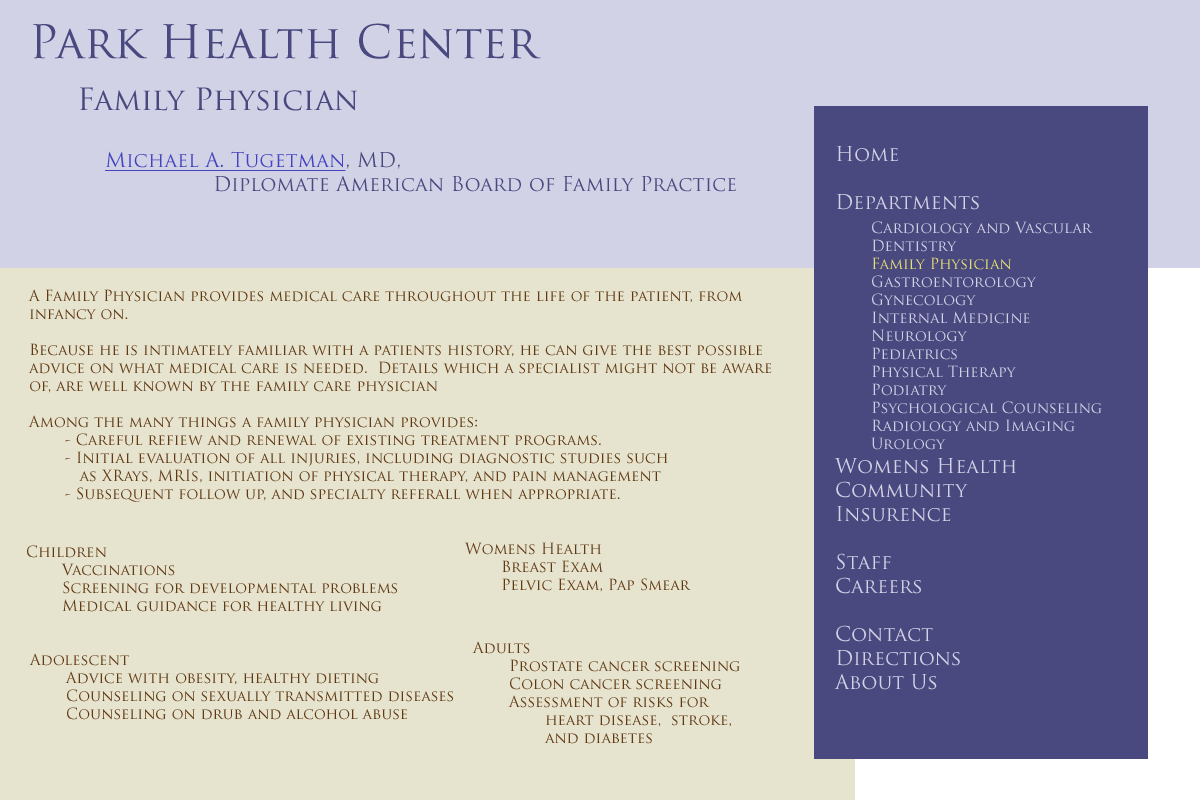
<style>
.page{position:relative;width:1200px;height:800px;background:#e6e3cf}
.page>*{position:absolute;margin:0}
.t1{font:45px "TrajanPro-Regular";color:#494980}
.t2{font:30px "TrajanPro-Regular";color:#494980}
.t3{font:15px "TrajanPro-Regular";color:#d2d2e6}
.t4{font:20px "TrajanPro-Regular";color:#d2d2e6}
.t5{font:15px "TrajanPro-Regular";color:#e6e073}
.t6{font:20px "TrajanPro-Regular";color:#494980}
.t7{font:20px "TrajanPro-Regular";color:#4444bf;text-decoration:underline}
.t8{font:15px "TrajanPro-Regular";color:#603913}
</style>
<div class="page">
<p class="t1" style="left:33px;top:23px;width:508px;height:36px">Park Health Center</p>
<p class="t2" style="left:79px;top:87px;width:278px;height:24px">Family Physician</p>
<p class="t3" style="left:834px;top:146px;width:268px;height:544px"><span class="t4">Home<br><br>Departments<br> </span>Cardiology and Vascular<br> Dentistry<br> <span class="t5">Family Physician</span><br> Gastroentorology<br> Gynecology<br> Internal Medicine<br> Neurology<br> Pediatrics<br> Physical Therapy<br> Podiatry<br> Psychological Counseling<br> Radiology and Imaging<br> Urology<br><span class="t4">Womens Health<br>Community<br>Insurence<br><br>Staff<br>Careers<br><br>Contact<br>Directions<br>About Us</span></p>
<p class="t6" style="left:105px;top:151px;width:631px;height:41px"><span class="t7">Michael A. Tugetman</span>, MD,<br>   Diplomate American Board of Family Practice</p>
<p class="t8" style="left:28px;top:289px;width:744px;height:213px">A Family Physician provides medical care throughout the life of the patient, from <br>infancy on.<br><br>Because he is intimately familiar with a patients history, he can give the best possible <br>advice on what medical care is needed.  Details which a specialist might not be aware <br>of, are well known by the family care physician<br><br>Among the many things a family physician provides:<br> - Careful refiew and renewal of existing treatment programs.<br> - Initial evaluation of all injuries, including diagnostic studies such<br>     as XRays, MRIs, initiation of physical therapy, and pain management<br> - Subsequent follow up, and specialty referall when appropriate.</p>
<p class="t8" style="left:27px;top:545px;width:370px;height:67px">Children<br> Vaccinations<br> Screening for developmental problems<br> Medical guidance for healthy living</p>
<p class="t8" style="left:464px;top:542px;width:227px;height:50px">Womens Health<br> Breast Exam<br> Pelvic Exam, Pap Smear</p>
<p class="t8" style="left:472px;top:641px;width:268px;height:103px">Adults<br> Prostate cancer screening<br> Colon cancer screening<br> Assessment of risks for <br>  heart disease,  stroke, <br>  and diabetes</p>
<p class="t8" style="left:29px;top:653px;width:424px;height:67px">Adolescent<br> Advice with obesity, healthy dieting<br> Counseling on sexually transmitted diseases<br> Counseling on drub and alcohol abuse</p>
</div>
